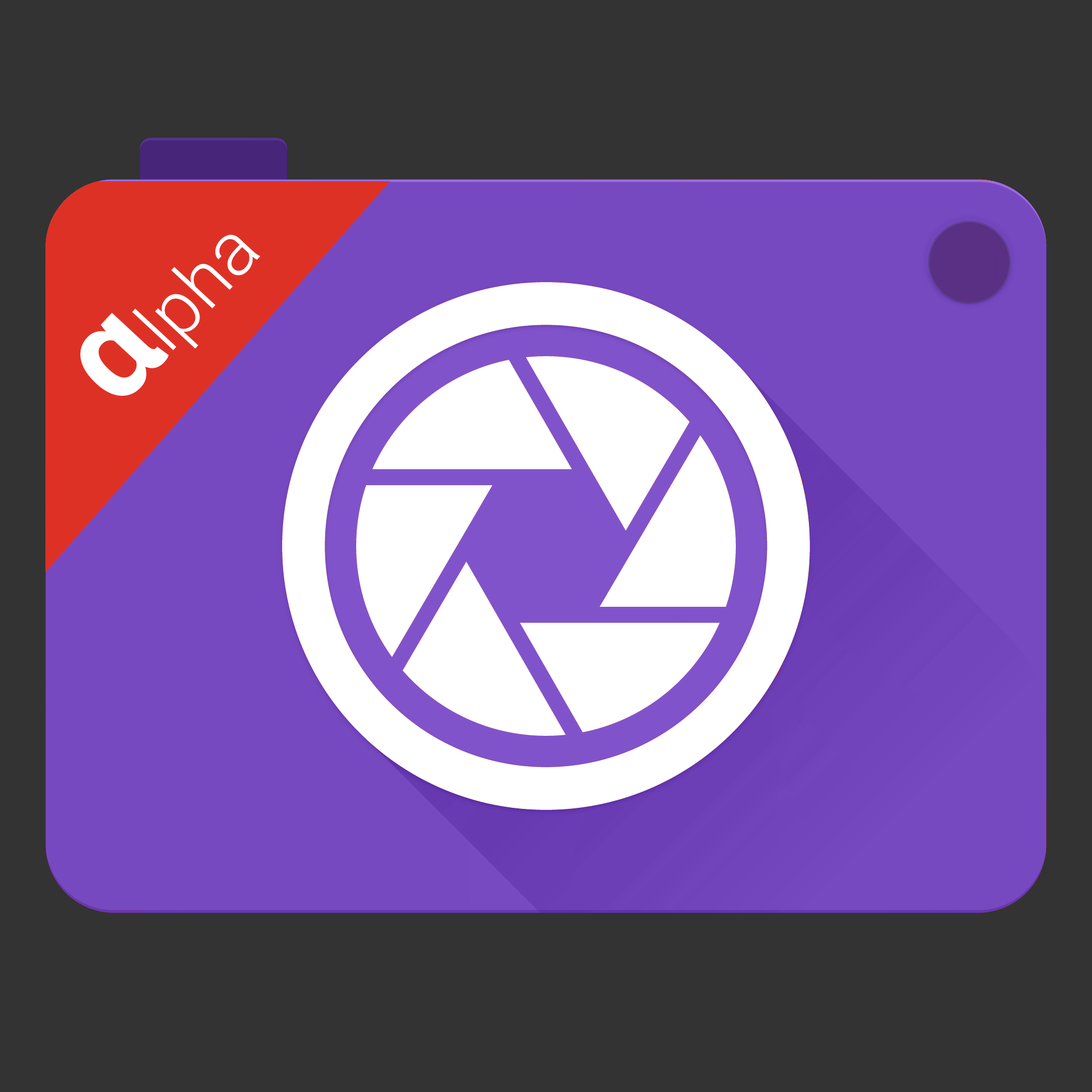
<style>
.page{position:relative;width:1092px;height:1092px;background:#333333}
.page>*{position:absolute;margin:0}
.t1{font:74.6px "Roboto-Light";color:#ffffff}
.t2{font:133.3px "Roboto-Bold";color:#ffffff}
</style>
<div class="page">
<p class="t1" style="left:80px;top:235px;width:180px;height:161px;rotate:-47deg"><span class="t2">α</span>lpha</p>
</div>
